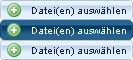
<style>
.page{position:relative;width:133px;height:60px}
.page>*{position:absolute;margin:0}
.t1{font:10px "ArialMT";color:#151c55}
.t2{font:10px "ArialMT";color:#ffffff}
</style>
<div class="page">
<p class="t1" style="left:32px;top:7px;width:94px;height:9px">Datei(en) auswählen</p>
<p class="t2" style="left:32px;top:27px;width:94px;height:9px">Datei(en) auswählen</p>
<p class="t1" style="left:32px;top:47px;width:94px;height:9px">Datei(en) auswählen</p>
</div>
